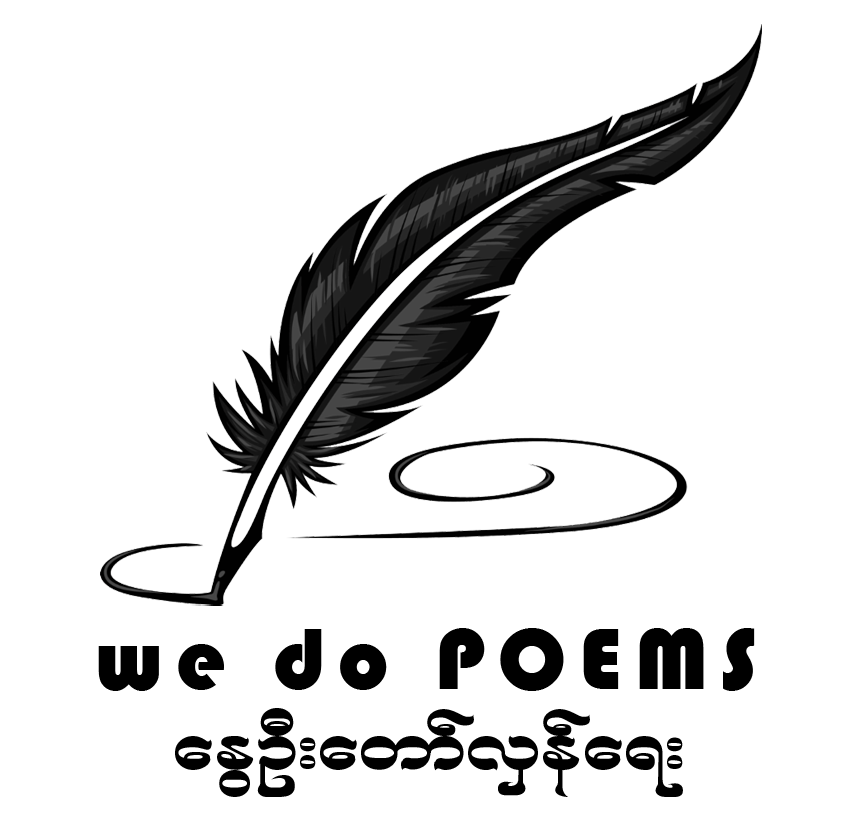
<style>
.page{position:relative;width:860px;height:822px;background:#ffffff}
.page>*{position:absolute;margin:0}
.t1{font:89.8px "Bauhaus93";letter-spacing:0.14em;color:#000000}
.t2{font:89.8px "W19ArtHouse-2009";color:#000000}
</style>
<div class="page">
<p class="t1" style="left:98px;top:628px;width:657px;height:63px">we do POEMS</p>
<p class="t2" style="left:175px;top:708px;width:508px;height:89px">aEGOD;awmfvSefa&amp;;</p>
</div>
